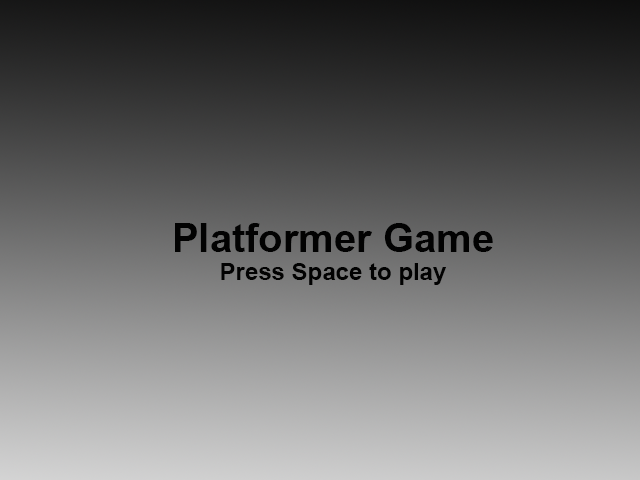
<style>
.page{position:relative;width:640px;height:480px}
.page>*{position:absolute;margin:0}
.t1{font:24px "Arial-BoldMT";color:#020202}
.t2{font:40px "Arial-BoldMT";color:#020202}
</style>
<div class="page">
<p class="t1" style="left:175px;top:223px;width:318px;height:62px;text-align:center"><span class="t2">Platformer Game<br></span>Press Space to play</p>
</div>
